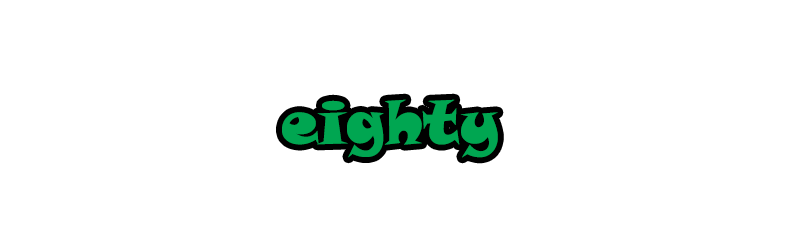
<style>
.page{position:relative;width:812px;height:249px;background:#ffffff}
.page>*{position:absolute;margin:0}
.t1{font:60px "SnapITC-Regular";color:#00a651}
</style>
<div class="page">
<p class="t1" style="left:282px;top:99px;width:216px;height:59px">eighty</p>
</div>
